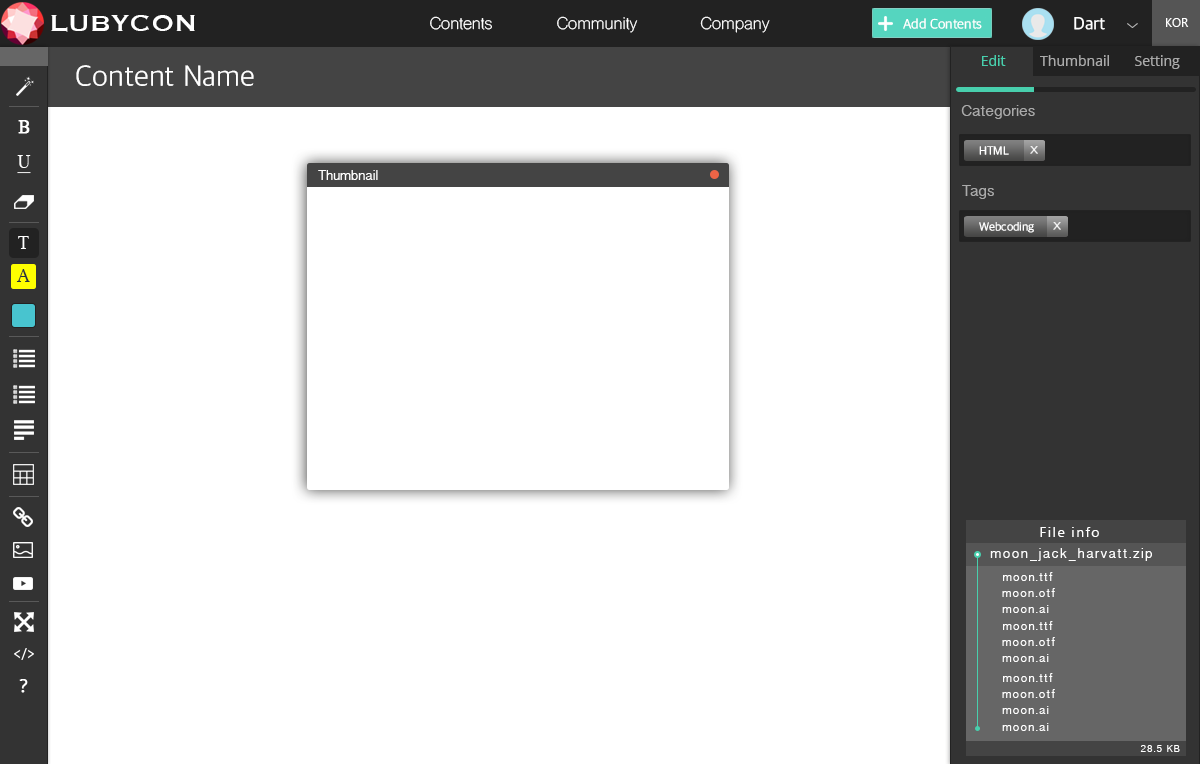
<style>
.page{position:relative;width:1200px;height:764px;background:#ffffff}
.page>*{position:absolute;margin:0}
.t1{font:30px "Copperplate";color:#ffffff}
.t2{font:16px "ShreeDev0714";color:#ffffff}
.t3{font:18px "AppleSDGothicNeo-Regular";color:#ffffff}
.t4{font:14px "AppleSDGothicNeo-Light";color:#ffffff}
.t5{font:12px "LaoUI";color:#ffffff}
.t6{font:30px "AppleSDGothicNeo-Light";color:#ffffff}
.t7{font:14px "OpenSans";color:#48cfad}
.t8{font:14px "OpenSans";color:#aaaaaa}
.t9{font:16px "TamilSangamMN";color:#aaaaaa}
.t10{font:12px "AppleSDGothicNeo-Light";color:#ffffff}
.t11{font:14px "TamilSangamMN";color:#ffffff}
.t12{font:18px "Times-Roman";color:#28333c}
.t13{font:14px "LaoUI";letter-spacing:0.1em;color:#ffffff}
.t14{font:14px "TamilSangamMN";letter-spacing:0.1em;color:#ffffff}
.t15{font:12px "TamilSangamMN";letter-spacing:0.1em;color:#ffffff}
.t16{font:10px "TamilSangamMN";letter-spacing:0.1em;color:#ffffff}
</style>
<div class="page">
<p class="t1" style="left:51px;top:15px;width:144px;height:17px">LUBYCON</p>
<p class="t2" style="left:430px;top:16px;width:62px;height:14px">Contents</p>
<p class="t2" style="left:557px;top:16px;width:81px;height:17px">Community</p>
<p class="t2" style="left:700px;top:16px;width:70px;height:17px">Company</p>
<p class="t3" style="left:1074px;top:17px;width:31px;height:13px">Dart</p>
<p class="t4" style="left:903px;top:18px;width:79px;height:11px">Add Contents</p>
<p class="t5" style="left:1166px;top:18px;width:23px;height:9px">KOR</p>
<p class="t6" style="left:76px;top:65px;width:178px;height:21px">Content Name</p>
<p class="t7" style="left:982px;top:55px;width:24px;height:11px">Edit</p>
<p class="t8" style="left:1040px;top:55px;width:69px;height:11px">Thumbnail</p>
<p class="t8" style="left:1135px;top:55px;width:45px;height:14px">Setting</p>
<p class="t9" style="left:961px;top:105px;width:74px;height:14px">Categories</p>
<p class="t10" style="left:979px;top:146px;width:30px;height:9px">HTML</p>
<p class="t11" style="left:318px;top:170px;width:60px;height:10px">Thumbnail</p>
<p class="t9" style="left:962px;top:185px;width:32px;height:14px">Tags</p>
<p class="t10" style="left:979px;top:222px;width:55px;height:11px">Webcoding</p>
<p class="t12" style="left:16px;top:269px;width:14px;height:13px">A</p>
<p class="t13" style="left:1040px;top:527px;width:59px;height:10px">File info</p>
<p class="t14" style="left:990px;top:548px;width:162px;height:13px">moon_jack_harvatt.zip</p>
<p class="t15" style="left:1003px;top:572px;width:50px;height:9px">moon.ttf</p>
<p class="t15" style="left:1002px;top:588px;width:53px;height:9px">moon.otf</p>
<p class="t15" style="left:1002px;top:605px;width:47px;height:8px">moon.ai</p>
<p class="t15" style="left:1003px;top:621px;width:50px;height:9px">moon.ttf</p>
<p class="t15" style="left:1002px;top:637px;width:53px;height:9px">moon.otf</p>
<p class="t15" style="left:1002px;top:654px;width:47px;height:8px">moon.ai</p>
<p class="t15" style="left:1003px;top:673px;width:50px;height:9px">moon.ttf</p>
<p class="t15" style="left:1002px;top:689px;width:53px;height:9px">moon.otf</p>
<p class="t15" style="left:1002px;top:706px;width:47px;height:8px">moon.ai</p>
<p class="t15" style="left:1002px;top:723px;width:47px;height:8px">moon.ai</p>
<p class="t16" style="left:1140px;top:745px;width:40px;height:7px">28.5 KB</p>
</div>
